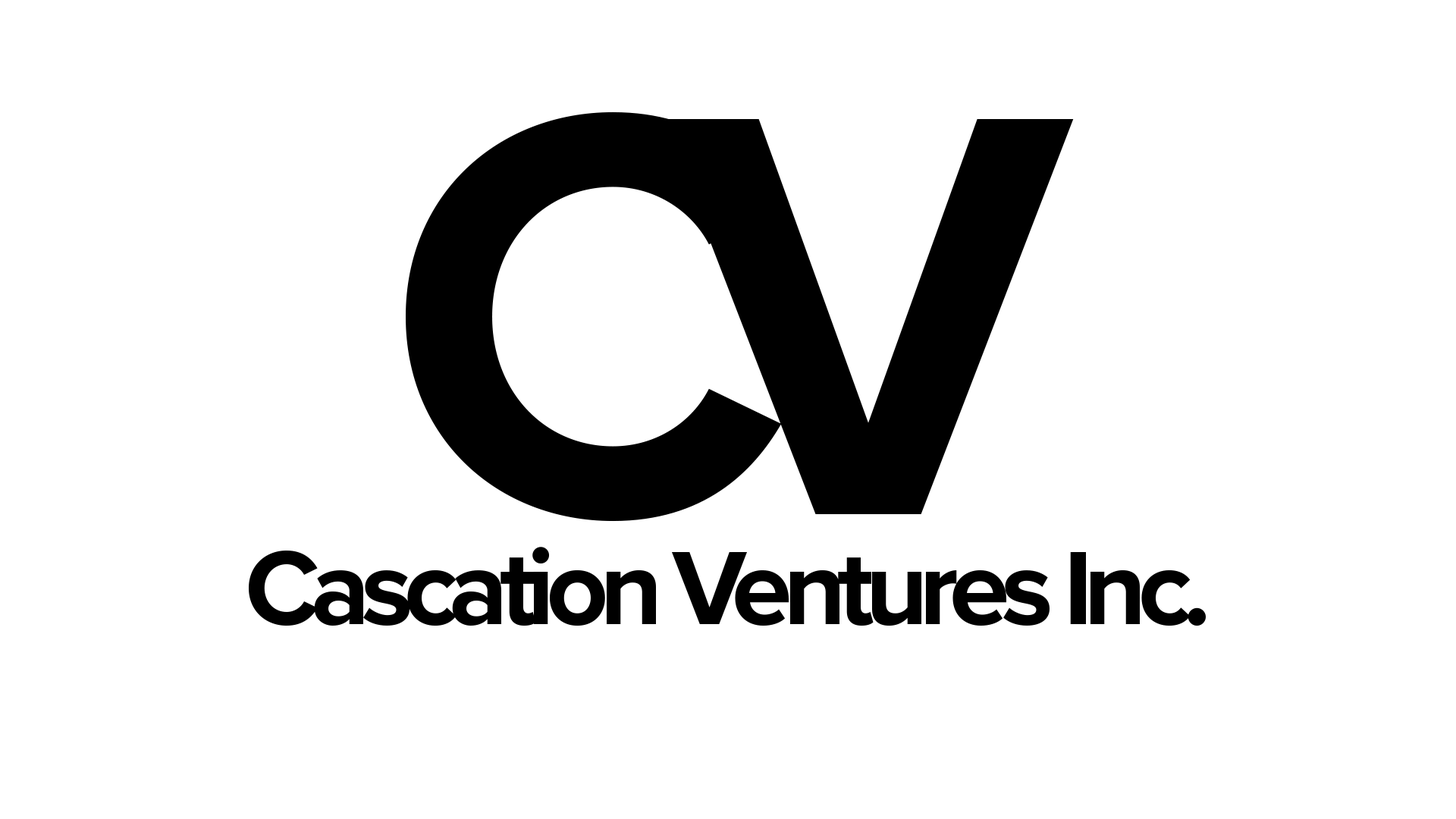
<style>
.page{position:relative;width:1456px;height:819px;background:#ffffff}
.page>*{position:absolute;margin:0}
.t1{font:592.3px "ProximaNova-Bold";letter-spacing:-0.21em;color:#000000}
.t2{font:108.4px "ProximaNova-Bold";letter-spacing:-0.08em;color:#000000}
</style>
<div class="page">
<p class="t1" style="left:406px;top:111px;width:668px;height:411px">CV</p>
<p class="t2" style="left:249px;top:547px;width:957px;height:79px">Cascation Ventures Inc.</p>
</div>
